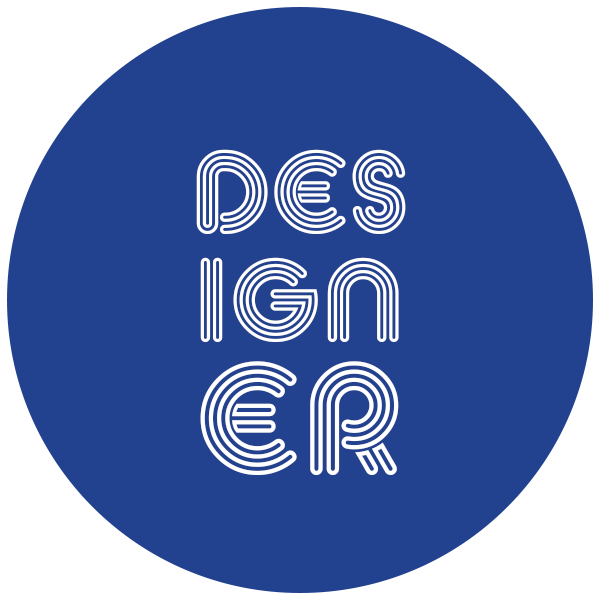
<style>
.page{position:relative;width:600px;height:600px;background:#22418e}
.page>*{position:absolute;margin:0}
.t1{font:116.7px/108.4px "MACCOSDemo";color:#ffffff}
.t2{font:158.3px/120.9px "MACCOSDemo";color:#ffffff}
</style>
<div class="page">
<p class="t1" style="left:196px;top:149px;width:210px;height:326px;text-align:center">DES<br>IGN<span class="t2">ER</span></p>
</div>
